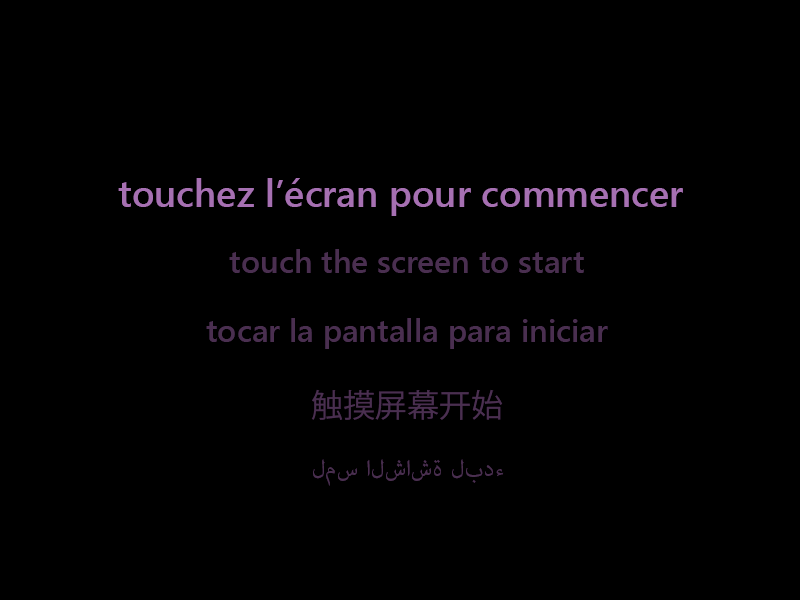
<style>
.page{position:relative;width:800px;height:600px;background:#000000}
.page>*{position:absolute;margin:0}
.t1{font:38px "SegoeUI-SemiBold";color:#a670b2}
.t2{font:32px "SegoeUI-SemiBold";color:#4a2f50}
.t3{font:32px "KozGoPr6N-Regular";color:#4a2f50}
.t4{font:32px "AdobeArabic-Regular";color:#4a2f50}
</style>
<div class="page">
<p class="t1" style="left:118px;top:178px;width:565px;height:38px">touchez l’écran pour commencer</p>
<p class="t2" style="left:229px;top:249px;width:355px;height:24px">touch the screen to start</p>
<p class="t2" style="left:206px;top:318px;width:402px;height:31px">tocar la pantalla para iniciar</p>
<p class="t3" style="left:311px;top:389px;width:192px;height:31px">触摸屏幕开始</p>
<p class="t4" style="left:313px;top:459px;width:191px;height:27px">لمس الشاشة لبدء</p>
</div>
